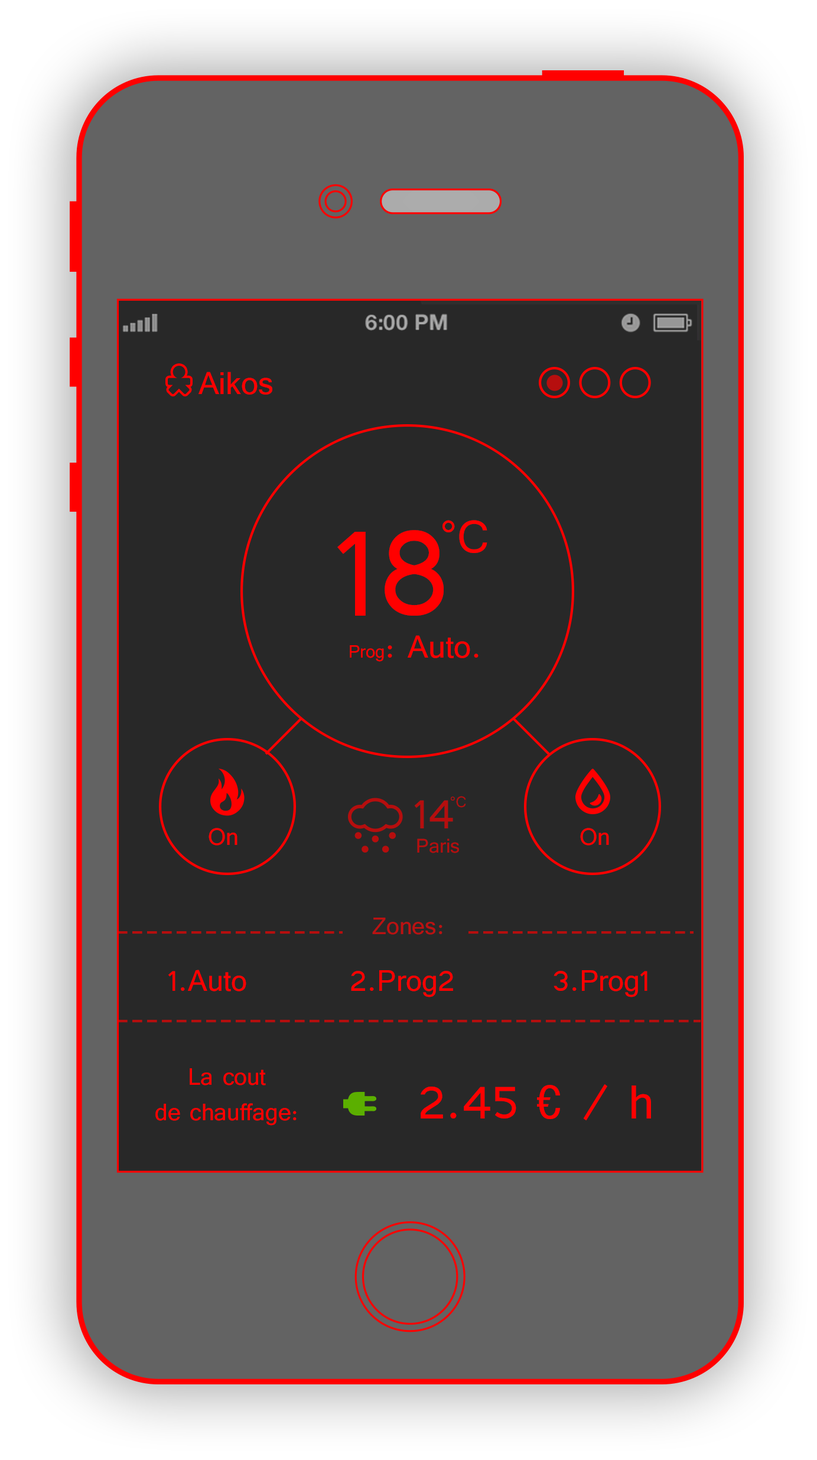
<style>
.page{position:relative;width:817px;height:1460px;background:#282828}
.page>*{position:absolute;margin:0}
.t1{font:39.4px "Tunga";color:#ff0000}
.t2{font:56.6px "Tunga";color:#ff0000}
.t3{font:157.8px "Tunga";color:#ff0000}
.t4{font:22.2px "Tunga";color:#ff0000}
.t5{font:18.9px "Tunga";color:#b60e0e}
.t6{font:52.6px "Tunga";color:#b60e0e}
.t7{font:7.1px "Tunga";color:#ff0000}
.t8{font:24.7px "Tunga";color:#b60e0e}
.t9{font:29.5px "Tunga";color:#bd1111}
.t10{font:36.9px "Tunga";color:#ff0000}
.t11{font:29.5px "Tunga";color:#ff0000}
.t12{font:59.1px "Tunga";color:#ff0000}
</style>
<div class="page">
<p class="t1" style="left:198px;top:372px;width:74px;height:23px">Aikos</p>
<p class="t2" style="left:442px;top:520px;width:45px;height:33px">°C</p>
<p class="t3" style="left:337px;top:530px;width:107px;height:86px">18</p>
<p class="t1" style="left:350px;top:635px;width:128px;height:27px"><span class="t4">Prog</span>: Auto.</p>
<p class="t5" style="left:451px;top:796px;width:15px;height:11px">°C</p>
<p class="t6" style="left:414px;top:800px;width:39px;height:28px">14</p>
<p class="t7" style="left:209px;top:828px;width:28px;height:17px;text-align:center">On</p>
<p class="t7" style="left:580px;top:828px;width:29px;height:17px;text-align:center">On</p>
<p class="t8" style="left:417px;top:838px;width:42px;height:15px">Paris</p>
<p class="t9" style="left:372px;top:917px;width:70px;height:17px">Zones:</p>
<p class="t10" style="left:168px;top:969px;width:78px;height:22px">1.Auto</p>
<p class="t10" style="left:351px;top:970px;width:102px;height:27px">2.Prog2</p>
<p class="t10" style="left:553px;top:970px;width:94px;height:27px">3.Prog1</p>
<p class="t11" style="left:155px;top:1068px;width:142px;height:57px;text-align:center">La cout<br>de chauffage:</p>
<p class="t12" style="left:421px;top:1084px;width:230px;height:37px">2.45 € / h</p>
</div>
